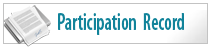
<style>
.page{position:relative;width:211px;height:47px;background:#ffffff}
.page>*{position:absolute;margin:0}
.t1{font:24px "MyriadPro-SemiboldCond";color:#11839a;scale:0.78 1}
</style>
<div class="page">
<p class="t1" style="left:58px;top:13px;width:126px;height:22px">Participation  Record</p>
</div>
